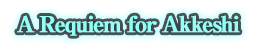
<style>
.page{position:relative;width:257px;height:48px;background:#ffffff}
.page>*{position:absolute;margin:0}
.t1{font:22px "RyuminPro-ExBold";letter-spacing:-0.08em;color:#94fff6;font-weight:bold}
</style>
<div class="page">
<p class="t1" style="left:17px;top:15px;width:223px;height:21px">A Requiem for Akkeshi</p>
</div>
